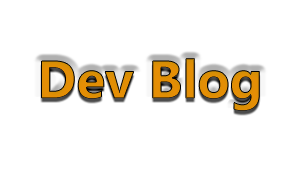
<style>
.page{position:relative;width:300px;height:170px;background:#ffffff}
.page>*{position:absolute;margin:0}
.t1{font:53px "SegoeUI-Bold";color:#e98e05}
</style>
<div class="page">
<p class="t1" style="left:41px;top:58px;width:219px;height:53px">Dev Blog</p>
</div>
